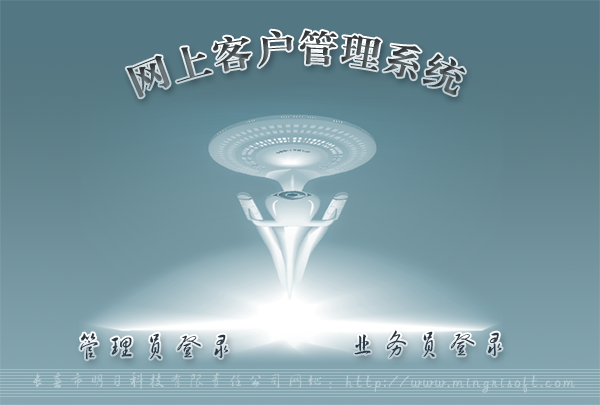
<style>
.page{position:relative;width:600px;height:405px}
.page>*{position:absolute;margin:0}
.t1{font:36px "FZXBSJW--GB1-0";letter-spacing:0.1em}
.t2{font:30px "FZHCJW--GB1-0";letter-spacing:0.1em;color:#2a3945}
.t3{font:18px "FZHCJW--GB1-0";letter-spacing:0.1em;color:#b6cbd2}
</style>
<div class="page">
<p class="t1" style="left:126px;top:30px;width:339px;height:68px">网上客户管理系统</p>
<p class="t2" style="left:80px;top:333px;width:148px;height:27px">管理员登录</p>
<p class="t2" style="left:354px;top:330px;width:148px;height:28px">业务员登录</p>
<p class="t3" style="left:33px;top:372px;width:542px;height:21px">长春市明日科技有限责任公司网址：http://www.mingrisoft.com</p>
</div>
